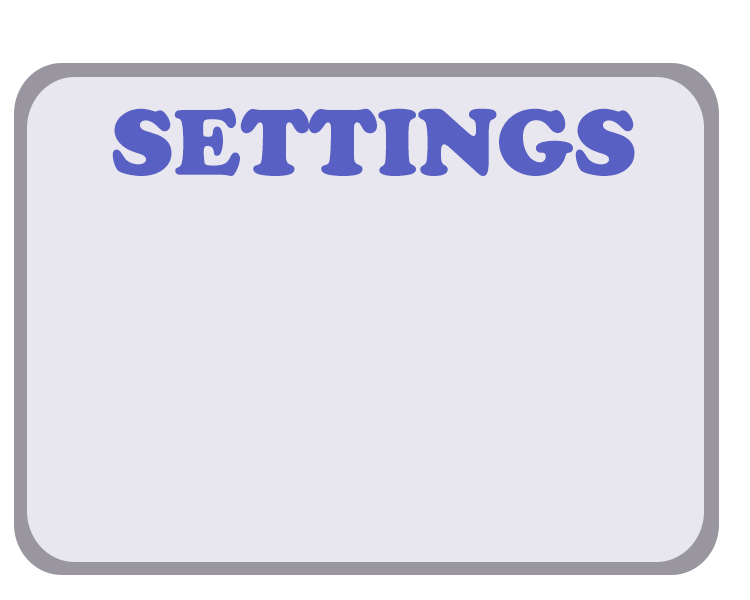
<style>
.page{position:relative;width:750px;height:600px;background:#e8e7f0}
.page>*{position:absolute;margin:0}
.t1{font:97.2px "CooperBlack";color:#5960c3}
</style>
<div class="page">
<p class="t1" style="left:112px;top:108px;width:523px;height:68px">SETTINGS</p>
</div>
